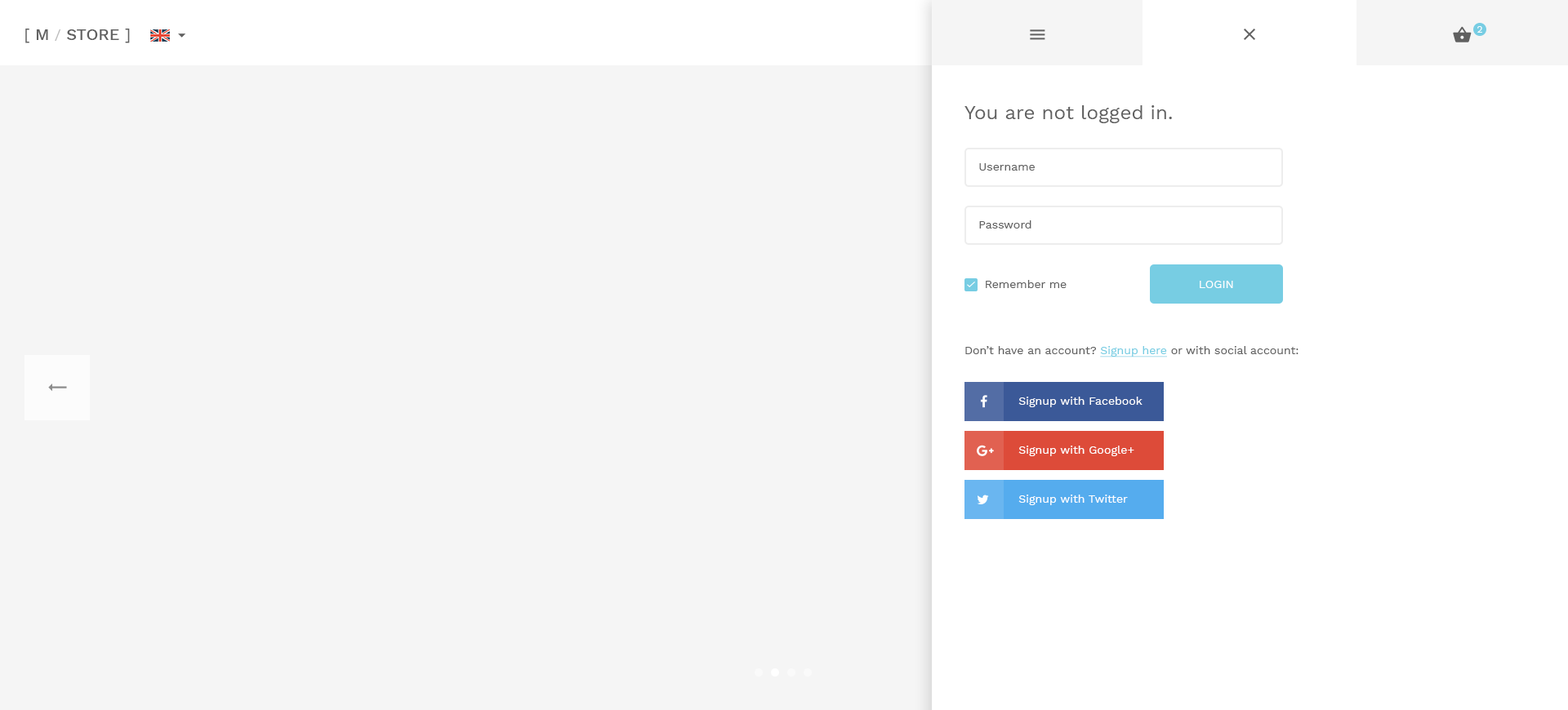
<style>
.page{position:relative;width:1568px;height:710px;background:#f5f5f5}
.page>*{position:absolute;margin:0}
.t1{font:16.3px "WorkSans-Medium";color:#606060}
.t2{font:16.3px "WorkSans-Regular";color:#606060}
.t3{font:14.7px "WorkSans-Regular";color:#bababa}
.t4{font:9.8px "WorkSans-Regular";color:#fffefe}
.t5{font:19.6px "WorkSans-Regular";color:#606060}
.t6{font:11.4px "WorkSans-Regular";color:#606060}
.t7{font:11.4px "WorkSans-Regular";color:#ffffff;text-transform:uppercase}
.t8{font:11.4px "WorkSans-Regular";color:#77cde3;text-decoration:underline}
.t9{font:11.4px "WorkSans-Regular";color:#ffffff}
</style>
<div class="page">
<p class="t1" style="left:25px;top:29px;width:105px;height:14px"><span class="t2">[</span> M <span class="t3">/ </span>STORE <span class="t2">]</span></p>
<p class="t4" style="left:1477px;top:26px;width:5px;height:7px">2</p>
<p class="t5" style="left:964px;top:105px;width:208px;height:18px">You are not logged in.</p>
<p class="t6" style="left:979px;top:163px;width:56px;height:8px">Username</p>
<p class="t6" style="left:979px;top:220px;width:52px;height:9px">Password</p>
<p class="t6" style="left:986px;top:280px;width:81px;height:8px">Remember me</p>
<p class="t7" style="left:1200px;top:281px;width:33px;height:7px">Login</p>
<p class="t6" style="left:965px;top:346px;width:333px;height:12px">Don’t have an account? <span class="t8">Signup here</span> or with social account:</p>
<p class="t9" style="left:1018px;top:397px;width:125px;height:11px">Signup with Facebook</p>
<p class="t9" style="left:1018px;top:446px;width:116px;height:11px">Signup with Google+</p>
<p class="t9" style="left:1018px;top:495px;width:110px;height:11px">Signup with Twitter</p>
</div>
